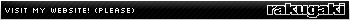
<style>
.page{position:relative;width:350px;height:20px;background:#000000}
.page>*{position:absolute;margin:0}
.t1{font:8px "Silkscreen-Regular";color:#ffffff}
</style>
<div class="page">
<p class="t1" style="left:5px;top:8px;width:129px;height:5px">visit my website! (Please)</p>
</div>
